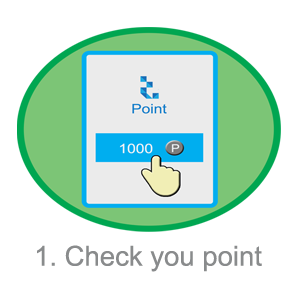
<style>
.page{position:relative;width:300px;height:300px;background:#ffffff}
.page>*{position:absolute;margin:0}
.t1{font:27.5px "ArialMT";color:#898b8c}
</style>
<div class="page">
<p class="t1" style="left:37px;top:245px;width:225px;height:27px">1. Check you point</p>
</div>
